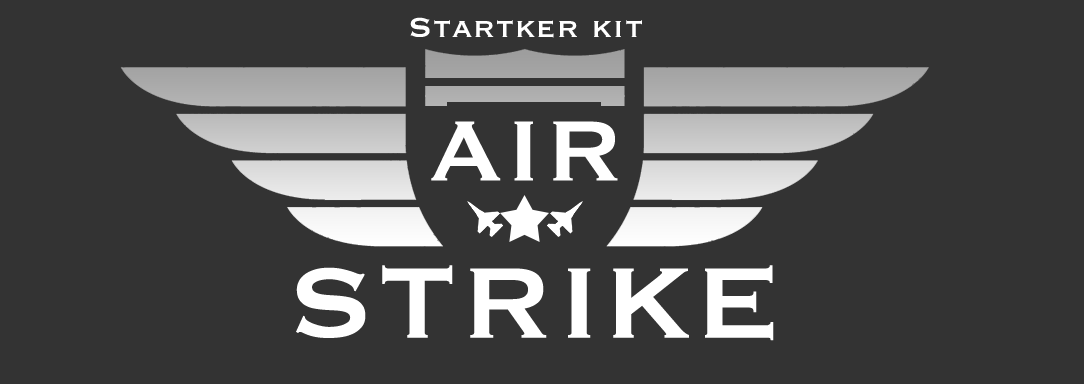
<style>
.page{position:relative;width:1084px;height:384px;background:#333333}
.page>*{position:absolute;margin:0}
.t1{font:36.2px "Copperplate";letter-spacing:0.02em;color:#ffffff}
.t2{font:111.4px "Copperplate";letter-spacing:0.02em;color:#ffffff}
.t3{font:131px "Copperplate";letter-spacing:0.02em;color:#ffffff}
</style>
<div class="page">
<p class="t1" style="left:410px;top:17px;width:232px;height:21px">Startker kit</p>
<p class="t2" style="left:431px;top:121px;width:187px;height:60px">AIR</p>
<p class="t3" style="left:296px;top:265px;width:478px;height:76px">STRIKE</p>
</div>
